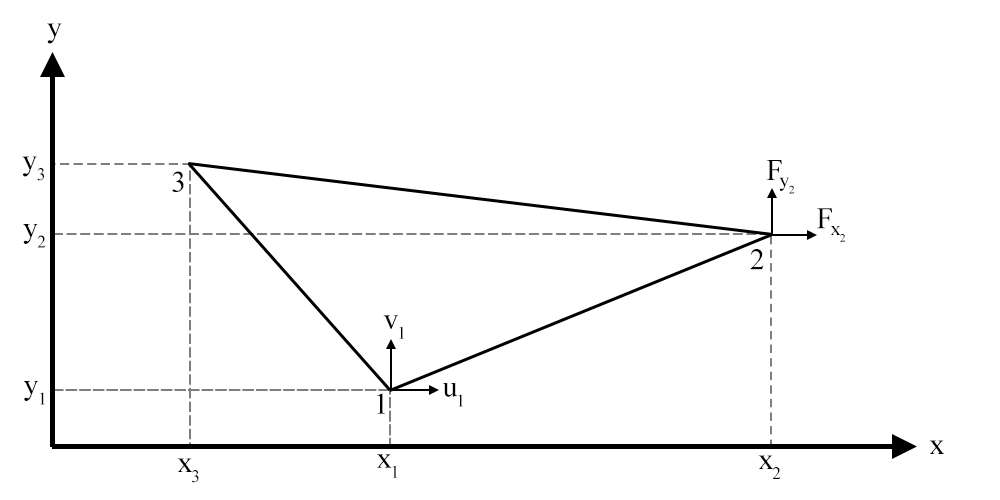
<style>
.page{position:relative;width:1000px;height:500px;background:#ffffff}
.page>*{position:absolute;margin:0}
.t1{font:30px "TimesNewRomanPSMT";letter-spacing:-0.04em;color:#000000}
.t2{font:20px "TimesNewRomanPSMT";letter-spacing:-0.04em;color:#000000}
</style>
<div class="page">
<p class="t1" style="left:47px;top:23px;width:15px;height:21px">y</p>
<p class="t1" style="left:22px;top:156px;width:22px;height:25px">y3</p>
<p class="t1" style="left:766px;top:160px;width:16px;height:20px">F</p>
<p class="t1" style="left:172px;top:171px;width:12px;height:21px">3</p>
<p class="t2" style="left:779px;top:177px;width:16px;height:17px">y2</p>
<p class="t1" style="left:817px;top:208px;width:15px;height:21px">F</p>
<p class="t1" style="left:23px;top:224px;width:23px;height:24px">y2</p>
<p class="t2" style="left:830px;top:226px;width:16px;height:16px">x2</p>
<p class="t1" style="left:750px;top:249px;width:14px;height:21px">2</p>
<p class="t1" style="left:383px;top:315px;width:21px;height:24px">v1</p>
<p class="t1" style="left:23px;top:381px;width:22px;height:24px">y1</p>
<p class="t1" style="left:442px;top:383px;width:21px;height:24px">u1</p>
<p class="t1" style="left:377px;top:393px;width:8px;height:21px">1</p>
<p class="t1" style="left:929px;top:440px;width:16px;height:14px">x</p>
<p class="t1" style="left:177px;top:458px;width:22px;height:25px">x3</p>
<p class="t1" style="left:377px;top:454px;width:21px;height:24px">x1</p>
<p class="t1" style="left:758px;top:455px;width:23px;height:24px">x2</p>
</div>
